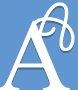
<style>
.page{position:relative;width:78px;height:90px;background:#6097d1}
.page>*{position:absolute;margin:0}
.t1{font:72px "GiddyupStd";color:#ffffff}
</style>
<div class="page">
<p class="t1" style="left:31px;top:2px;width:44px;height:49px;rotate:8deg">A</p>
</div>
